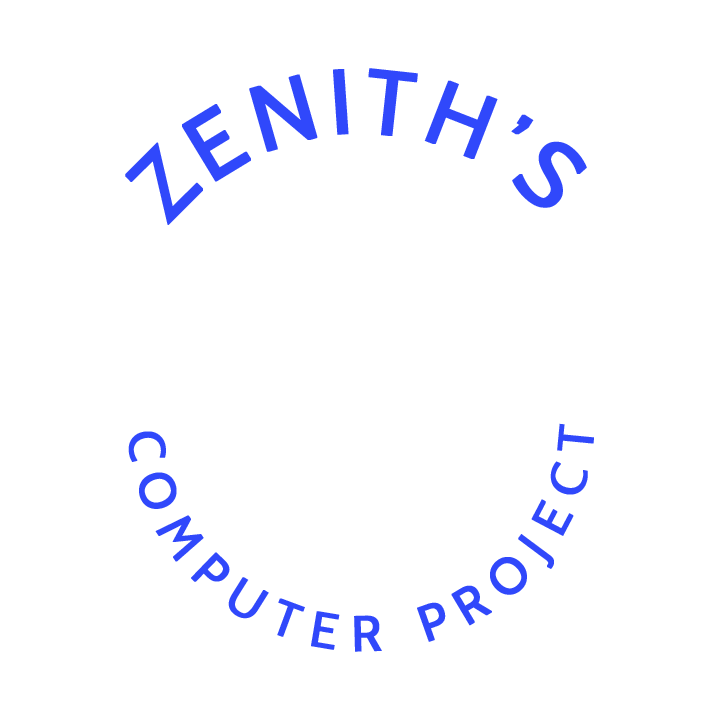
<style>
.page{position:relative;width:720px;height:720px;background:#ffffff}
.page>*{position:absolute;margin:0}
.t1{font:91.7px "Cabin-Regular";letter-spacing:0.06em;color:#3048fb;text-transform:uppercase;font-weight:bold}
.t2{font:50px "Cabin-Regular";letter-spacing:0.3em;color:#3048fb;text-transform:uppercase;font-weight:bold}
</style>
<div class="page">
<p class="t1" style="left:125px;top:68px;width:462px;height:157px">Zenith’s</p>
<p class="t2" style="left:128px;top:423px;width:466px;height:229px">Computer project</p>
</div>
